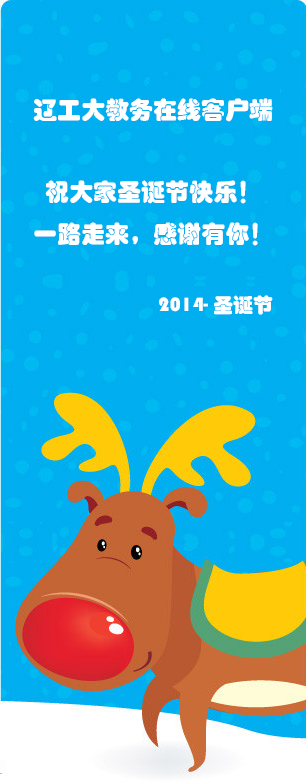
<style>
.page{position:relative;width:306px;height:783px;background:#01aef0}
.page>*{position:absolute;margin:0}
.t1{font:24px "STHupo";color:#ffffff}
.t2{font:20px "STHupo";color:#ffffff}
</style>
<div class="page">
<p class="t1" style="left:33px;top:98px;width:240px;height:24px">辽工大教务在线客户端</p>
<p class="t1" style="left:34px;top:180px;width:224px;height:66px;text-align:center">祝大家圣诞节快乐！<br>一路走来，感谢有你！</p>
<p class="t2" style="left:159px;top:295px;width:114px;height:20px">2014-圣诞节</p>
</div>
